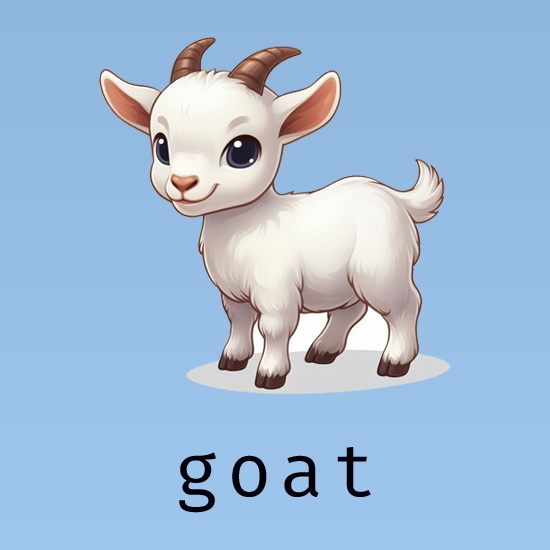
<style>
.page{position:relative;width:550px;height:550px}
.page>*{position:absolute;margin:0}
.t1{font:73.3px "FiraCode-Regular";letter-spacing:0.1em;color:#030009}
</style>
<div class="page">
<p class="t1" style="left:179px;top:447px;width:192px;height:66px">goat</p>
</div>
